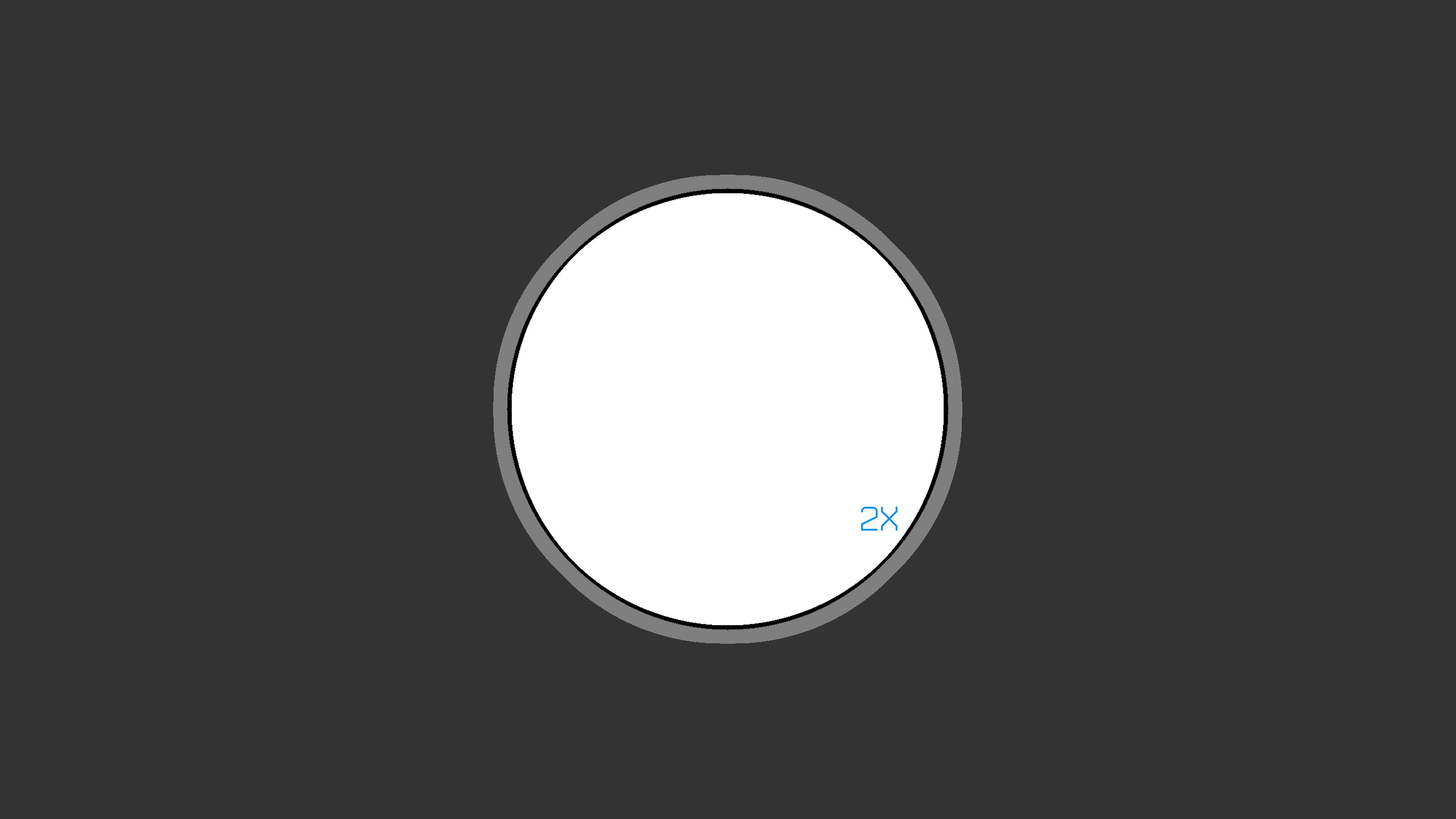
<style>
.page{position:relative;width:1456px;height:819px;background:#333333}
.page>*{position:absolute;margin:0}
.t1{font:34.1px "Arame-Thin";color:#108fea}
</style>
<div class="page">
<p class="t1" style="left:861px;top:507px;width:36px;height:24px">2x</p>
</div>
